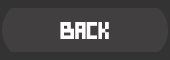
<style>
.page{position:relative;width:170px;height:60px;background:#413f3f}
.page>*{position:absolute;margin:0}
.t1{font:24px "PixelCyr-Normal";color:#ffffff}
</style>
<div class="page">
<p class="t1" style="left:60px;top:22px;width:49px;height:17px">BACK</p>
</div>
